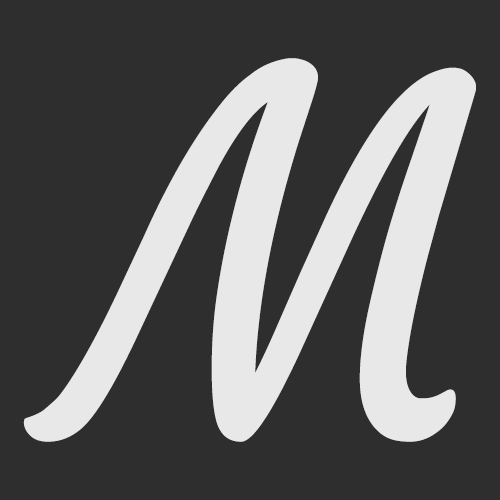
<style>
.page{position:relative;width:500px;height:500px;background:#2e2e2e}
.page>*{position:absolute;margin:0}
.t1{font:501.6px "Courgette-Regular";letter-spacing:-0.075em;color:#e8e8e8;scale:0.86 1}
</style>
<div class="page">
<p class="t1" style="left:23px;top:58px;width:453px;height:384px">M</p>
</div>
